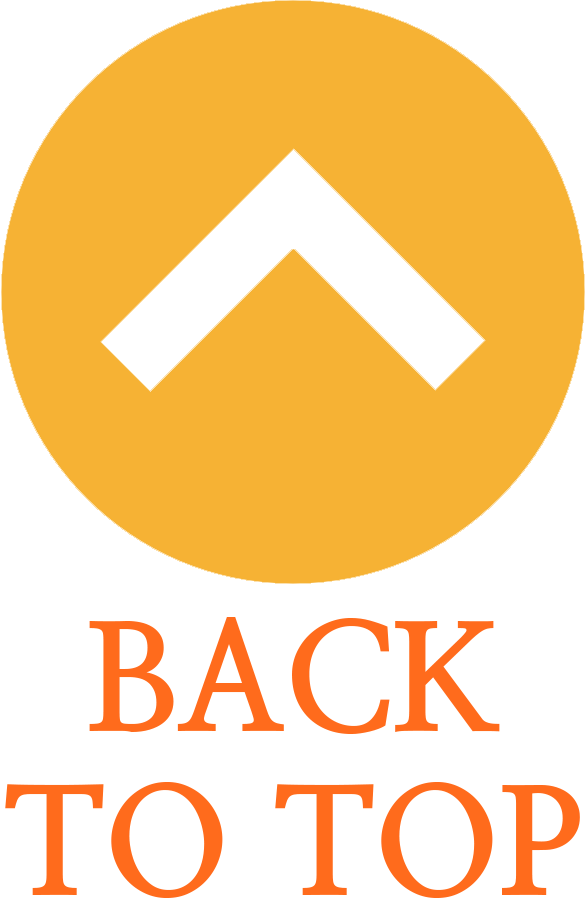
<style>
.page{position:relative;width:585px;height:900px;background:#ffffff}
.page>*{position:absolute;margin:0}
.t1{font:150px/164px "NanumMyeongjoExtraBold";letter-spacing:-0.005em;color:#ff6b1c}
</style>
<div class="page">
<p class="t1" style="left:5px;top:617px;width:575px;height:281px;text-align:center">BACK<br>TO TOP</p>
</div>
